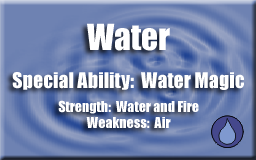
<style>
.page{position:relative;width:256px;height:160px}
.page>*{position:absolute;margin:0}
.t1{font:33.3px "Impact";color:#ffffff}
.t2{font:20px "Impact";color:#ffffff}
.t3{font:14px "Impact";color:#ffffff}
</style>
<div class="page">
<p class="t1" style="left:87px;top:23px;width:83px;height:28px">Water</p>
<p class="t2" style="left:12px;top:72px;width:232px;height:18px">Special Ability:  Water Magic</p>
<p class="t3" style="left:58px;top:100px;width:141px;height:14px">Strength:  Water and Fire</p>
<p class="t3" style="left:86px;top:117px;width:85px;height:11px">Weakness:  Air</p>
</div>
